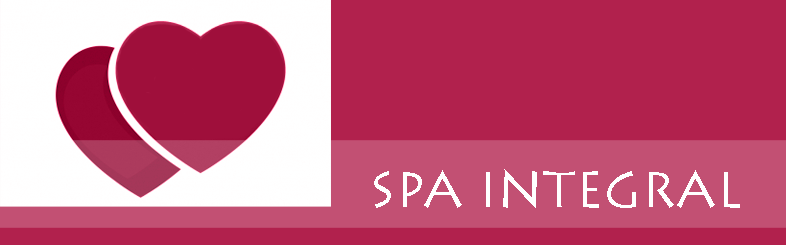
<style>
.page{position:relative;width:786px;height:245px;background:#b1214d}
.page>*{position:absolute;margin:0}
.t1{font:50px "LithosPro-Regular";color:#ffffff}
</style>
<div class="page">
<p class="t1" style="left:374px;top:169px;width:366px;height:39px">SPA INTEGRAL</p>
</div>
